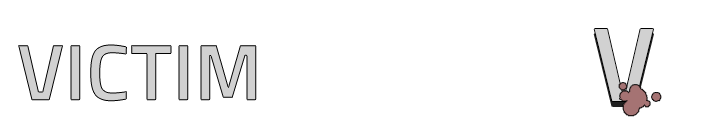
<style>
.page{position:relative;width:715px;height:140px;background:#ffffff}
.page>*{position:absolute;margin:0}
.t1{font:79.1px "Titillium-Semibold";letter-spacing:0.01em;color:#d1d1d1}
</style>
<div class="page">
<p class="t1" style="left:18px;top:45px;width:238px;height:56px">VICTIM</p>
</div>
